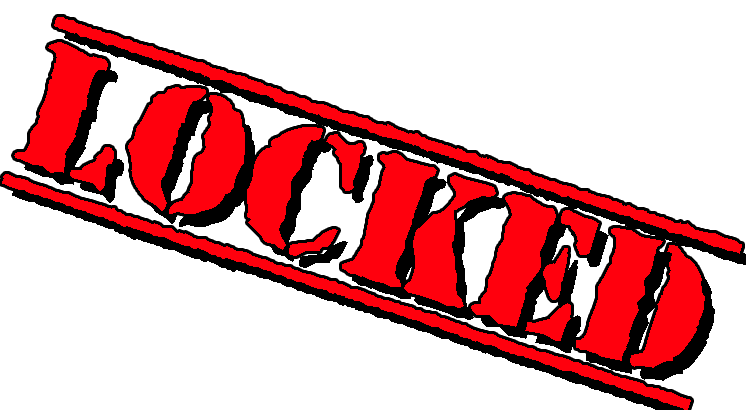
<style>
.page{position:relative;width:746px;height:410px;background:#ffffff}
.page>*{position:absolute;margin:0}
.t1{font:185.2px "TopSecret-Bold";color:#ff000d}
</style>
<div class="page">
<p class="t1" style="left:2px;top:17px;width:740px;height:393px;rotate:18deg">LOCKED</p>
</div>
